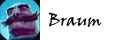
<style>
.page{position:relative;width:140px;height:40px;background:#ffffff}
.page>*{position:absolute;margin:0}
.t1{font:12px "VinerHandITC";color:#000000}
</style>
<div class="page">
<p class="t1" style="left:48px;top:12px;width:54px;height:16px">Braum</p>
</div>
